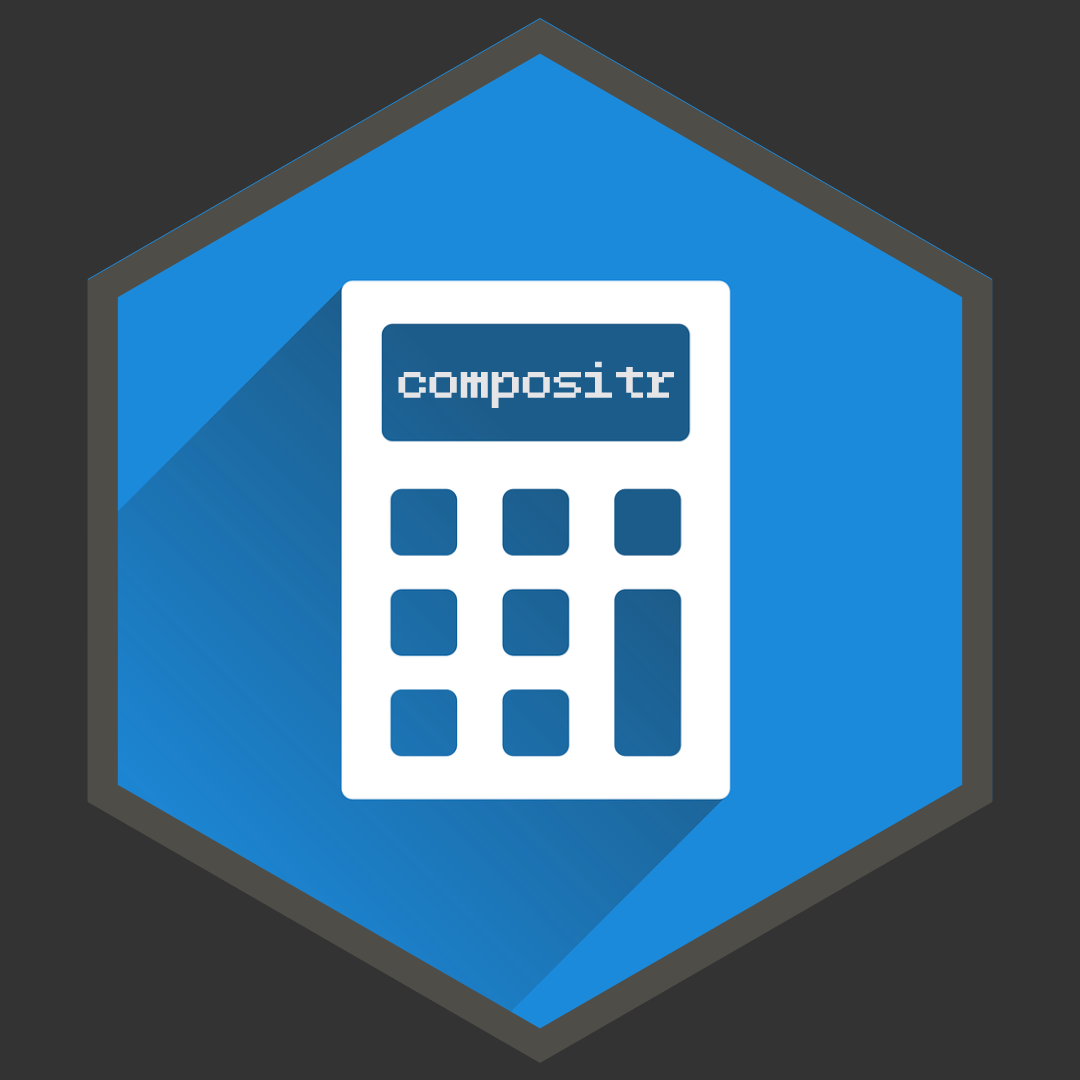
<style>
.page{position:relative;width:1080px;height:1080px;background:#333333}
.page>*{position:absolute;margin:0}
.t1{font:51px "BPdotsSquares-Bold";color:#e5e5e8;font-weight:bold}
</style>
<div class="page">
<p class="t1" style="left:398px;top:361px;width:277px;height:47px">compositr</p>
</div>
